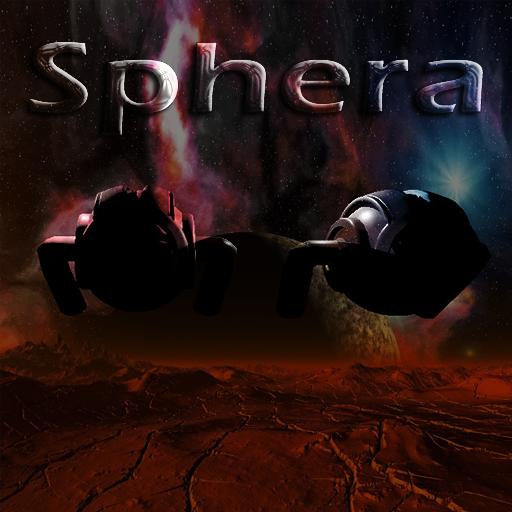
<style>
.page{position:relative;width:512px;height:512px}
.page>*{position:absolute;margin:0}
.t1{font:104px "ErasITC-Demi";letter-spacing:0.025em;scale:1.31 1}
</style>
<div class="page">
<p class="t1" style="left:28px;top:41px;width:455px;height:95px">Sphera</p>
<p class="t1" style="left:28px;top:41px;width:455px;height:95px">Sphera</p>
</div>
